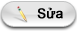
<style>
.page{position:relative;width:77px;height:31px;background:#e6e6e6}
.page>*{position:absolute;margin:0}
.t1{font:13.3px "ArialMT";color:#000000;font-weight:bold}
</style>
<div class="page">
<p class="t1" style="left:37px;top:7px;width:26px;height:12px">Sửa</p>
</div>
